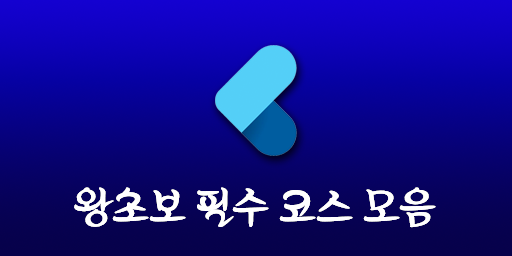
<style>
.page{position:relative;width:512px;height:256px}
.page>*{position:absolute;margin:0}
.t1{font:40.1px "Untitled";letter-spacing:-0.025em;color:#ffffff}
</style>
<div class="page">
<p class="t1" style="left:74px;top:187px;width:362px;height:41px">왕초보 필수 코스 모음</p>
</div>
